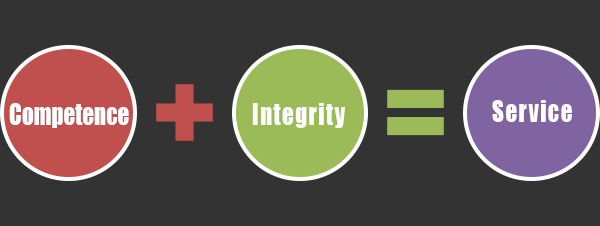
<style>
.page{position:relative;width:600px;height:226px;background:#333333}
.page>*{position:absolute;margin:0}
.t1{font:47.5px "Impact";letter-spacing:0.06em;color:#ffffff;scale:0.83 1}
.t2{font:47.5px "Impact";color:#fffefe;scale:0.83 1}
</style>
<div class="page">
<p class="t1" style="left:492px;top:100px;width:80px;height:22px">Service</p>
<p class="t2" style="left:9px;top:103px;width:120px;height:25px">Competence</p>
<p class="t1" style="left:252px;top:103px;width:93px;height:25px">Integrity</p>
</div>
